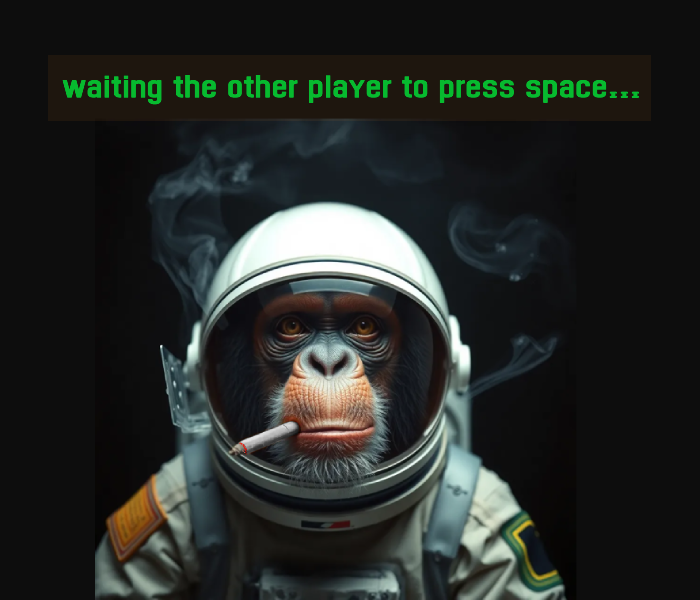
<style>
.page{position:relative;width:700px;height:600px;background:#0d0d0d}
.page>*{position:absolute;margin:0}
.t1{font:47.9px "Dhurjati";color:#07ba2f;scale:0.79 1}
</style>
<div class="page">
<p class="t1" style="left:62px;top:75px;width:577px;height:30px">waiting the other player to press space...</p>
</div>
